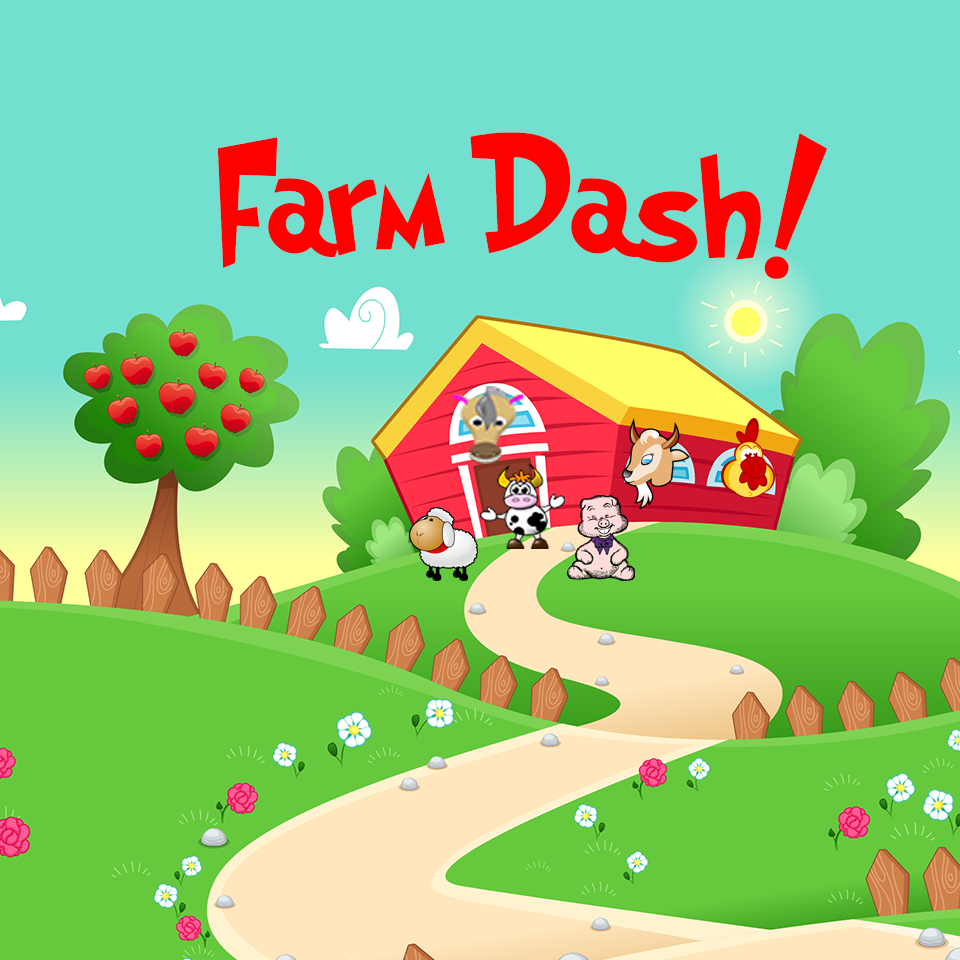
<style>
.page{position:relative;width:960px;height:960px;background:#73dfcf}
.page>*{position:absolute;margin:0}
.t1{font:150px "Grinched";color:#fd0101}
</style>
<div class="page">
<p class="t1" style="left:217px;top:132px;width:610px;height:147px">Farm Dash!</p>
</div>
